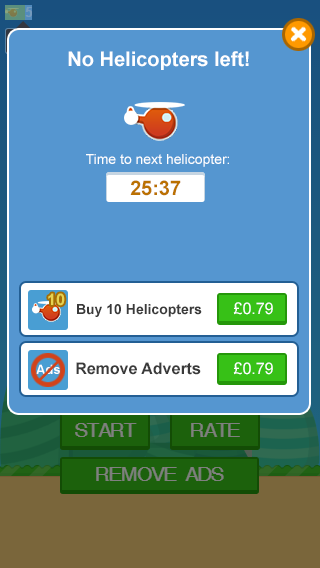
<style>
.page{position:relative;width:320px;height:568px;background:#5596d0}
.page>*{position:absolute;margin:0}
.t1{font:20px "Arial-BoldMT";color:#ffffff}
.t2{font:14px "ArialMT";color:#ffffff}
.t3{font:20px "Arial-BoldMT";color:#bb7101}
.t4{font:16px "Arial-BoldMT";color:#e5d251}
.t5{font:14px "Arial-BoldMT";color:#3a3a3a}
.t6{font:16px "ArialMT";color:#ffffff}
.t7{font:13px "Arial-BoldMT";color:#ffffff}
.t8{font:16px "Arial-BoldMT";color:#3a3a3a}
</style>
<div class="page">
<p class="t1" style="left:68px;top:51px;width:181px;height:19px">No Helicopters left!</p>
<p class="t2" style="left:86px;top:154px;width:143px;height:13px">Time to next helicopter:</p>
<p class="t3" style="left:130px;top:180px;width:51px;height:16px">25:37</p>
<p class="t4" style="left:48px;top:293px;width:17px;height:13px">10</p>
<p class="t5" style="left:77px;top:304px;width:125px;height:13px">Buy 10 Helicopters</p>
<p class="t6" style="left:233px;top:302px;width:40px;height:13px">£0.79</p>
<p class="t7" style="left:36px;top:364px;width:24px;height:10px">Ads</p>
<p class="t8" style="left:76px;top:362px;width:125px;height:13px">Remove Adverts</p>
<p class="t6" style="left:233px;top:362px;width:40px;height:13px">£0.79</p>
</div>
